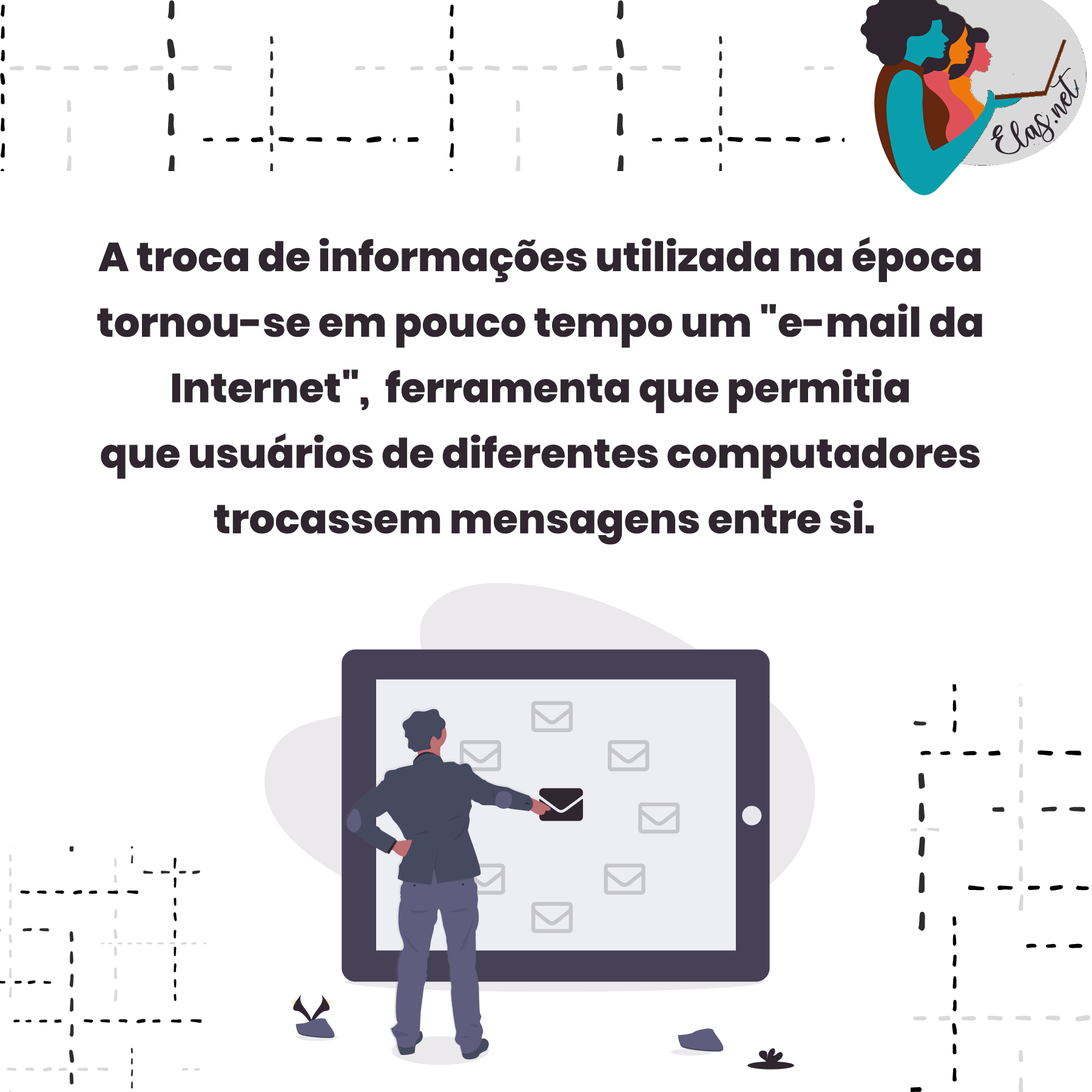
<style>
.page{position:relative;width:1092px;height:1092px;background:#ffffff}
.page>*{position:absolute;margin:0}
.t1{font:25px "charlinda-Regular";color:#2f262f;scale:1.18 1}
.t2{font:40.6px/65.5px "Poppins-ExtraBold";color:#2f262f}
</style>
<div class="page">
<p class="t1" style="left:991px;top:67px;width:88px;height:88px;rotate:-42deg">Elas.net</p>
<p class="t2" style="left:97px;top:237px;width:885px;height:308px;text-align:center">A troca de informações utilizada na época <br>tornou-se em pouco tempo um "e-mail da <br>Internet",  ferramenta que permitia <br>que usuários de diferentes computadores <br>trocassem mensagens entre si.</p>
</div>
